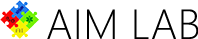
<style>
.page{position:relative;width:198px;height:39px;background:#ffffff}
.page>*{position:absolute;margin:0}
.t1{font:42.3px "SegoeWP-Light";letter-spacing:0.01em;color:#000000}
</style>
<div class="page">
<p class="t1" style="left:47px;top:9px;width:152px;height:30px">AIM LAB</p>
</div>
